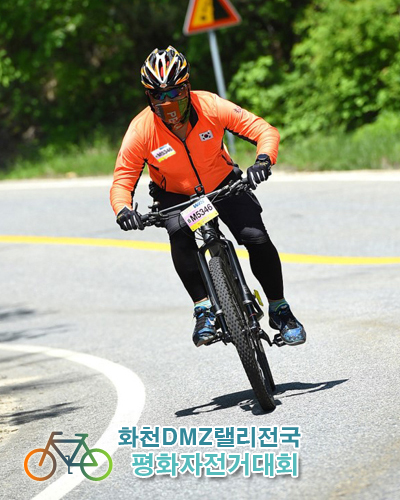
<style>
.page{position:relative;width:400px;height:500px}
.page>*{position:absolute;margin:0}
.t1{font:22px "H2gtrE";color:#338899}
.t2{font:24px "H2gtrE";color:#55bbbb}
</style>
<div class="page">
<p class="t1" style="left:118px;top:426px;width:183px;height:22px">화천DMZ랠리전국</p>
<p class="t2" style="left:132px;top:453px;width:165px;height:23px">평화자전거대회</p>
</div>
